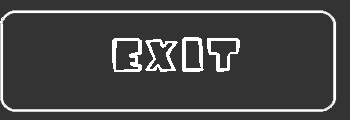
<style>
.page{position:relative;width:350px;height:120px;background:#333333}
.page>*{position:absolute;margin:0}
.t1{font:72px "iceagefont";color:#ffffff}
</style>
<div class="page">
<p class="t1" style="left:112px;top:37px;width:128px;height:35px">Exit</p>
</div>
